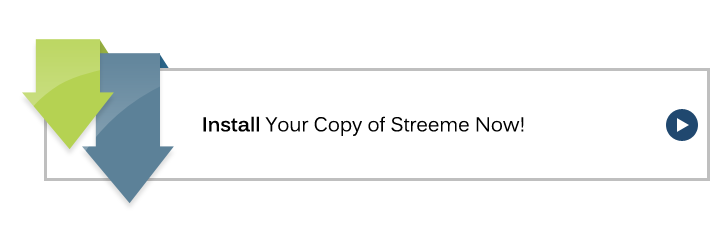
<style>
.page{position:relative;width:710px;height:250px;background:#ffffff}
.page>*{position:absolute;margin:0}
.t1{font:19.7px "Kalinga";color:#000000}
.t2{font:19.7px "Kalinga-Bold";color:#000000}
</style>
<div class="page">
<p class="t1" style="left:203px;top:116px;width:321px;height:20px"><span class="t2">Install </span>Your Copy of Streeme Now!</p>
</div>
